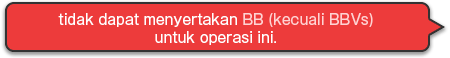
<style>
.page{position:relative;width:450px;height:58px;background:#ed3b3b}
.page>*{position:absolute;margin:0}
.t1{font:14px/18px "GothicMB101Pro-Regular";color:#ffffff}
.t2{font:14px/18px "GothicMB101Pro-Regular";color:#ffd3d3}
</style>
<div class="page">
<p class="t1" style="left:58px;top:13px;width:315px;height:32px;text-align:center">tidak dapat menyertakan<span class="t2"> BB (kecuali BBVs)<br></span>untuk operasi ini.</p>
</div>
